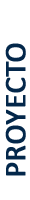
<style>
.page{position:relative;width:30px;height:200px;background:#ffffff}
.page>*{position:absolute;margin:0}
.t1{font:30px "Calibri";color:#03274a;font-weight:bold}
</style>
<div class="page">
<p class="t1" style="left:5px;top:43px;width:21px;height:133px;rotate:-90deg">PROYECTO</p>
</div>
